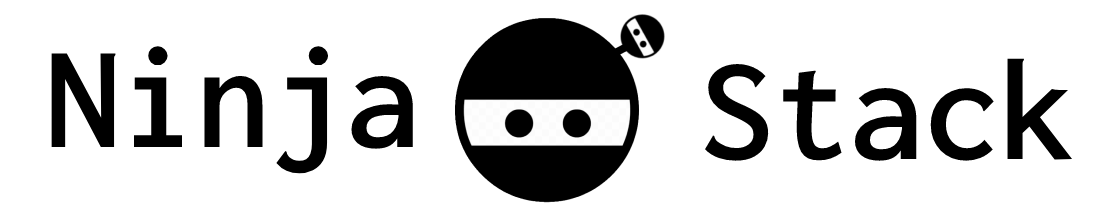
<style>
.page{position:relative;width:1098px;height:208px;background:#ffffff}
.page>*{position:absolute;margin:0}
.t1{font:150px "Inconsolata-SemiBold";color:#000000}
</style>
<div class="page">
<p class="t1" style="left:51px;top:46px;width:362px;height:128px">Ninja</p>
<p class="t1" style="left:705px;top:58px;width:368px;height:103px">Stack</p>
</div>
